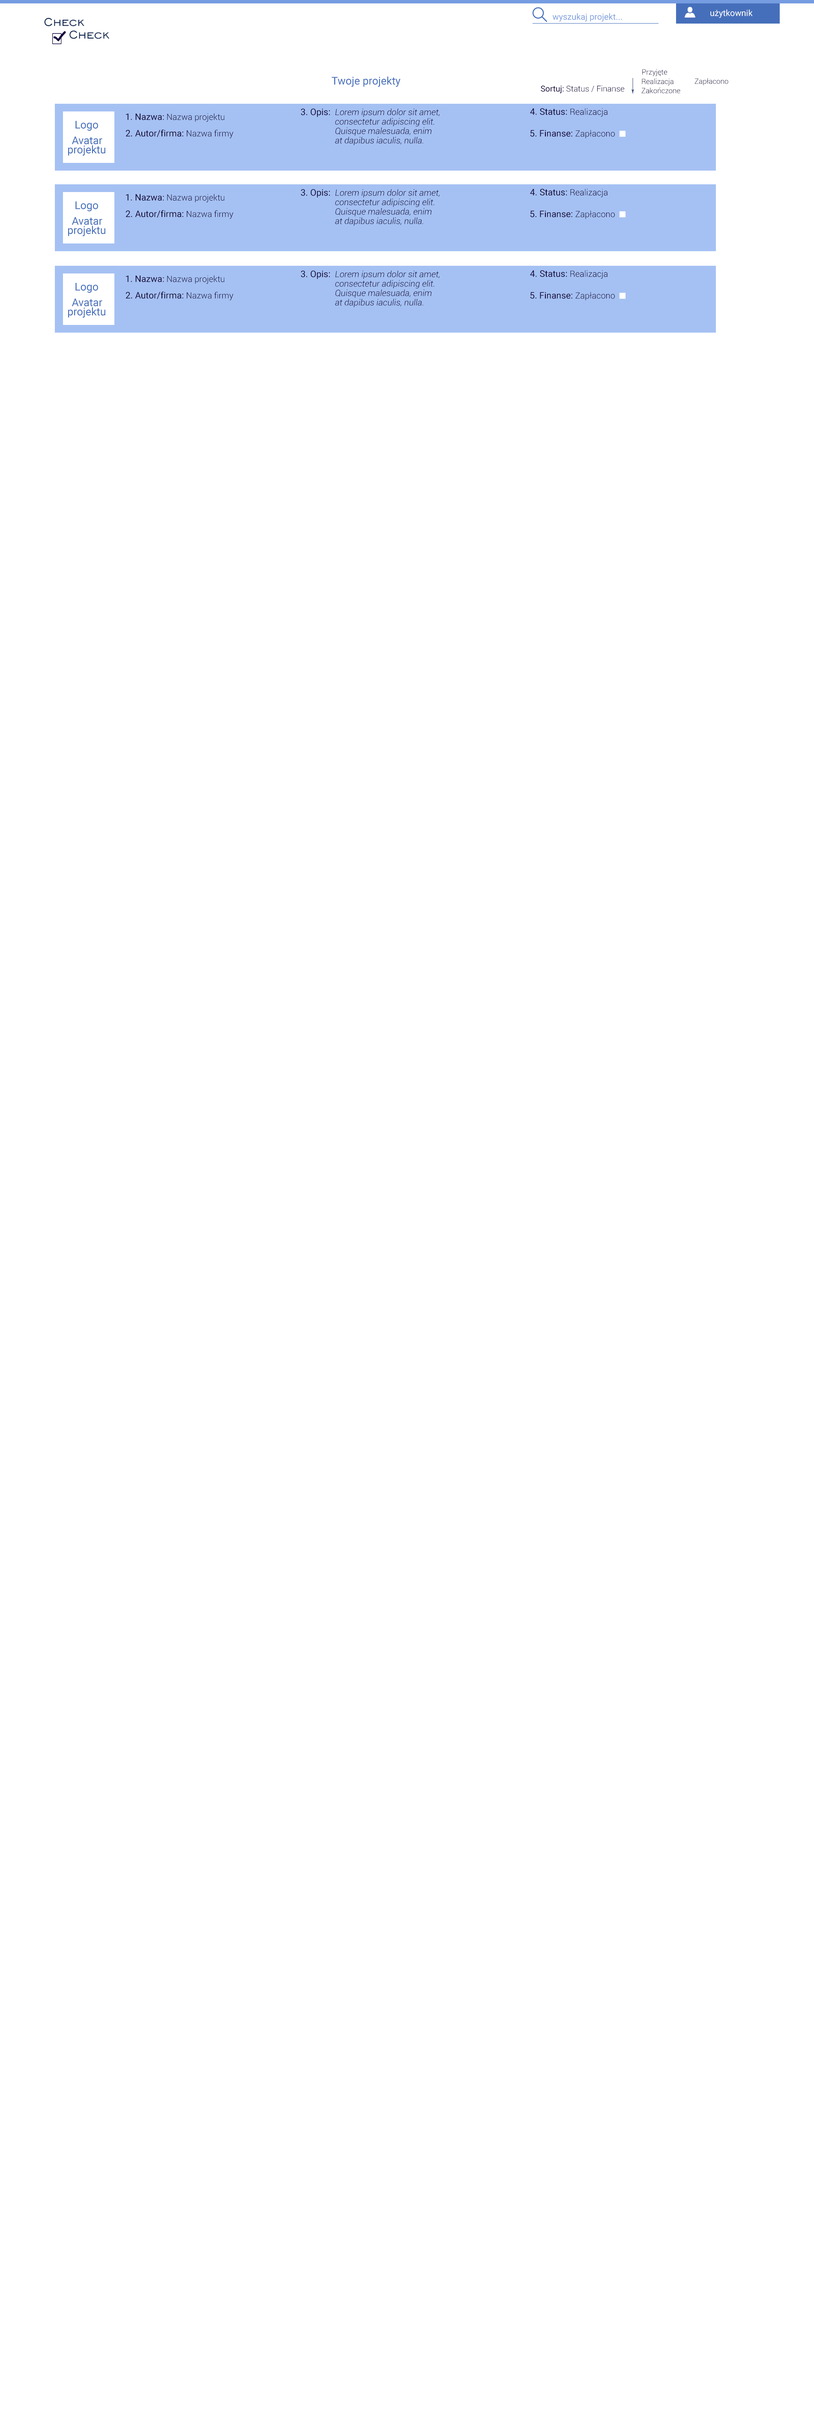
<style>
.page{position:relative;width:814px;height:2430px;background:#ffffff}
.page>*{position:absolute;margin:0}
.t1{font:15px "EngraversGothicBT-Regular";color:#0e2652}
.t2{font:8.6px "Roboto-Regular";color:#7ea0df}
.t3{font:8.6px "Roboto-Regular";color:#ffffff}
.t4{font:10.7px "Roboto-Regular";color:#466fbb}
.t5{font:7.3px "Roboto-Light";color:#130539}
.t6{font:8.1px "Roboto-Light";color:#130539}
.t7{font:8.1px "Roboto-Regular";color:#130539}
.t8{font:8.6px "Roboto-Light";color:#130539}
.t9{font:9px "Roboto-Regular";color:#130539}
.t10{font:8.6px "Roboto-Regular";color:#130539}
.t11{font:8.6px/9.4px "Roboto-LightItalic";color:#130539}
</style>
<div class="page">
<p class="t1" style="left:44px;top:18px;width:40px;height:8px">Check</p>
<p class="t2" style="left:553px;top:13px;width:69px;height:9px">wyszukaj projekt...</p>
<p class="t3" style="left:711px;top:9px;width:42px;height:9px">użytkownik</p>
<p class="t1" style="left:69px;top:30px;width:41px;height:9px">Check</p>
<p class="t4" style="left:332px;top:76px;width:69px;height:11px">Twoje projekty</p>
<p class="t5" style="left:642px;top:69px;width:25px;height:7px">Przyjęte</p>
<p class="t5" style="left:695px;top:78px;width:34px;height:7px">Zapłacono</p>
<p class="t6" style="left:541px;top:85px;width:83px;height:8px"><span class="t7">Sortuj: </span>Status / Finanse</p>
<p class="t5" style="left:642px;top:87px;width:39px;height:6px">Zakończone</p>
<p class="t5" style="left:642px;top:78px;width:32px;height:8px">Realizacja</p>
<p class="t8" style="left:126px;top:113px;width:99px;height:9px"><span class="t9">1. Nazwa</span><span class="t10">: </span>Nazwa projektu</p>
<p class="t9" style="left:301px;top:108px;width:29px;height:9px">3. Opis:</p>
<p class="t11" style="left:335px;top:108px;width:105px;height:37px">Lorem ipsum dolor sit amet, <br>consectetur adipiscing elit.<br>Quisque malesuada, enim <br>at dapibus iaculis, nulla.</p>
<p class="t9" style="left:530px;top:108px;width:78px;height:9px">4. Status: <span class="t8">Realizacja</span></p>
<p class="t4" style="left:75px;top:121px;width:23px;height:10px">Logo</p>
<p class="t4" style="left:72px;top:136px;width:30px;height:8px">Avatar</p>
<p class="t9" style="left:126px;top:129px;width:108px;height:9px">2. Autor/firma: <span class="t8">Nazwa firmy</span></p>
<p class="t9" style="left:530px;top:130px;width:85px;height:8px">5. Finanse: <span class="t8">Zapłacono</span></p>
<p class="t4" style="left:68px;top:145px;width:37px;height:11px">projektu</p>
<p class="t8" style="left:126px;top:194px;width:99px;height:8px"><span class="t9">1. Nazwa</span><span class="t10">: </span>Nazwa projektu</p>
<p class="t9" style="left:301px;top:189px;width:29px;height:9px">3. Opis:</p>
<p class="t11" style="left:335px;top:189px;width:105px;height:37px">Lorem ipsum dolor sit amet, <br>consectetur adipiscing elit.<br>Quisque malesuada, enim <br>at dapibus iaculis, nulla.</p>
<p class="t9" style="left:530px;top:189px;width:78px;height:8px">4. Status: <span class="t8">Realizacja</span></p>
<p class="t4" style="left:75px;top:201px;width:23px;height:10px">Logo</p>
<p class="t4" style="left:72px;top:217px;width:30px;height:8px">Avatar</p>
<p class="t9" style="left:126px;top:210px;width:108px;height:9px">2. Autor/firma: <span class="t8">Nazwa firmy</span></p>
<p class="t9" style="left:530px;top:210px;width:85px;height:9px">5. Finanse: <span class="t8">Zapłacono</span></p>
<p class="t4" style="left:68px;top:226px;width:37px;height:10px">projektu</p>
<p class="t9" style="left:530px;top:270px;width:78px;height:9px">4. Status: <span class="t8">Realizacja</span></p>
<p class="t8" style="left:126px;top:275px;width:99px;height:9px"><span class="t9">1. Nazwa</span><span class="t10">: </span>Nazwa projektu</p>
<p class="t9" style="left:301px;top:270px;width:29px;height:9px">3. Opis:</p>
<p class="t11" style="left:335px;top:270px;width:105px;height:37px">Lorem ipsum dolor sit amet, <br>consectetur adipiscing elit.<br>Quisque malesuada, enim <br>at dapibus iaculis, nulla.</p>
<p class="t4" style="left:75px;top:283px;width:23px;height:10px">Logo</p>
<p class="t9" style="left:126px;top:291px;width:108px;height:9px">2. Autor/firma: <span class="t8">Nazwa firmy</span></p>
<p class="t9" style="left:530px;top:292px;width:85px;height:8px">5. Finanse: <span class="t8">Zapłacono</span></p>
<p class="t4" style="left:72px;top:298px;width:30px;height:8px">Avatar</p>
<p class="t4" style="left:68px;top:307px;width:37px;height:11px">projektu</p>
</div>
